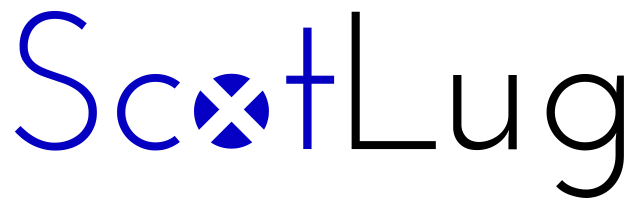
<style>
.page{position:relative;width:639px;height:200px;background:#ffffff}
.page>*{position:absolute;margin:0}
.t1{font:196px "JosefinSans";color:#000000}
.t2{font:196px "JosefinSans";color:#0500c1}
.t3{font:196px "JosefinSans";color:#ffffff}
</style>
<div class="page">
<p class="t1" style="left:14px;top:11px;width:610px;height:187px"><span class="t2">Sc</span><span class="t3">o</span><span class="t2">t</span>Lug</p>
</div>
